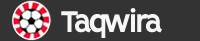
<style>
.page{position:relative;width:200px;height:41px;background:#333333}
.page>*{position:absolute;margin:0}
.t1{font:33.3px "Vision-Bold";letter-spacing:-0.088em;color:#f6f6f6}
</style>
<div class="page">
<p class="t1" style="left:61px;top:8px;width:101px;height:30px">Taqwira</p>
</div>
